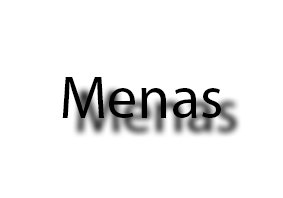
<style>
.page{position:relative;width:283px;height:198px;background:#ffffff}
.page>*{position:absolute;margin:0}
.t1{font:60px "MyriadPro-Regular";color:#000000}
</style>
<div class="page">
<p class="t1" style="left:62px;top:77px;width:159px;height:41px">Menas</p>
</div>
